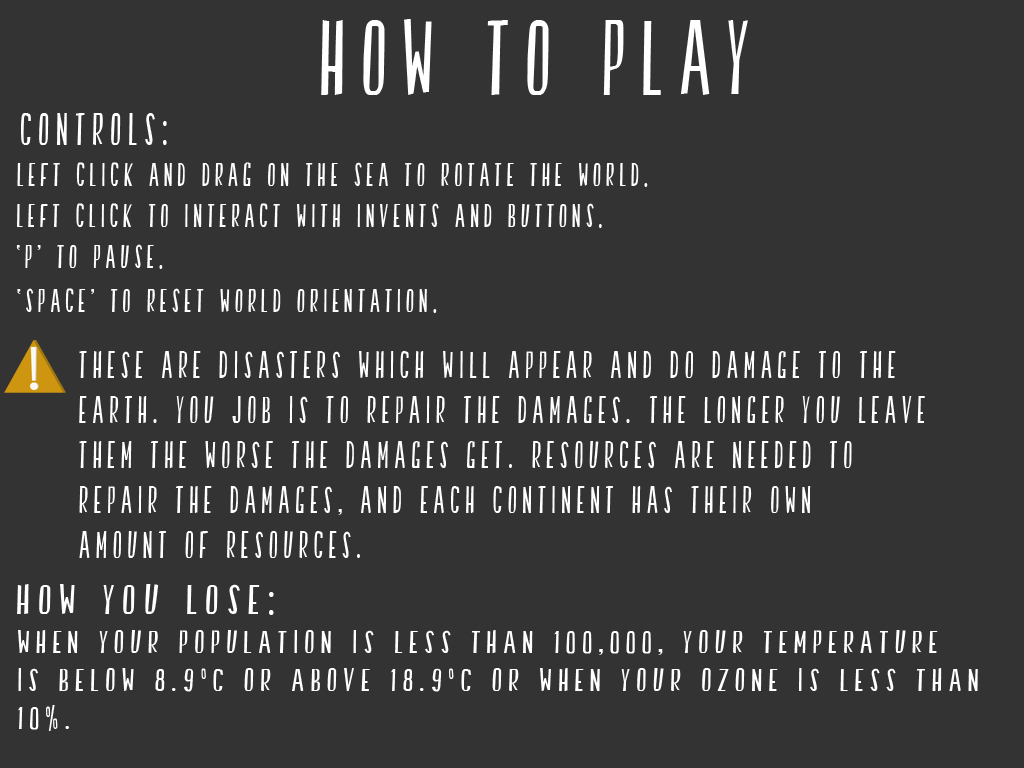
<style>
.page{position:relative;width:1024px;height:768px;background:#333333}
.page>*{position:absolute;margin:0}
.t1{font:106.7px "SwallowFalls";letter-spacing:0.2em;color:#ffffff;scale:0.75 1}
.t2{font:45.8px "SwallowFalls";letter-spacing:0.2em;color:#ffffff;scale:0.75 1}
.t3{font:33.3px "SwallowFalls";letter-spacing:0.2em;color:#ffffff;scale:0.75 1}
.t4{font:37.5px "SwallowFalls";letter-spacing:0.2em;color:#ffffff;scale:0.75 1}
.t5{font:41.7px "SwallowFalls";letter-spacing:0.2em;color:#ffffff}
.t6{font:31.7px "SwallowFalls";letter-spacing:0.2em;color:#ffffff}
</style>
<div class="page">
<p class="t1" style="left:321px;top:19px;width:427px;height:76px">How To Play</p>
<p class="t2" style="left:21px;top:113px;width:146px;height:32px">Controls:</p>
<p class="t3" style="left:17px;top:162px;width:631px;height:25px">Left Click and drag on the sea to rotate the world.</p>
<p class="t3" style="left:17px;top:203px;width:585px;height:25px">left click to interact with invents and buttons.</p>
<p class="t3" style="left:16px;top:244px;width:147px;height:25px">‘P’ to pause.</p>
<p class="t3" style="left:17px;top:288px;width:420px;height:25px">‘Space’ to reset world orientation.</p>
<p class="t4" style="left:79px;top:351px;width:846px;height:207px">These are disasters which will appear and do damage to the<br>earth. You job is to repair the damages. The longer you leave <br>them the worse the damages get. resources are needed to <br>repair the damages, and each continent has their own <br>amount of resources.</p>
<p class="t5" style="left:17px;top:584px;width:257px;height:31px">How you lose:</p>
<p class="t6" style="left:18px;top:630px;width:960px;height:101px">When your population is less than 100,000, your temperature<br>is below 8.9°C or above 18.9°C or when your ozone is less than <br>10%.</p>
</div>
